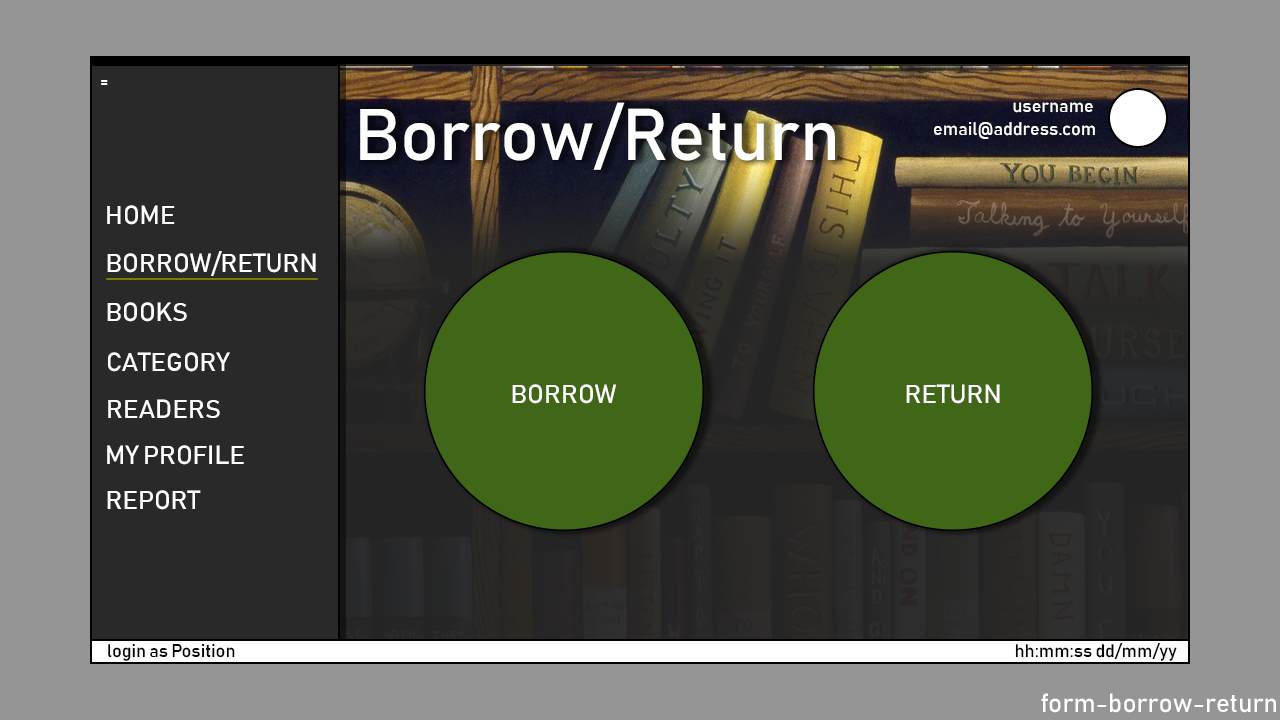
<style>
.page{position:relative;width:1280px;height:720px;background:#959595}
.page>*{position:absolute;margin:0}
.t1{font:18px "Bahnschrift";color:#ffffff}
.t2{font:72px "Bahnschrift";color:#ffffff}
.t3{font:26px "Bahnschrift";color:#ffffff}
.t4{font:26px "Bahnschrift";color:#fefefe}
.t5{font:18px "Bahnschrift";color:#000000}
</style>
<div class="page">
<p class="t1" style="left:101px;top:80px;width:7px;height:5px">=</p>
<p class="t2" style="left:360px;top:102px;width:475px;height:68px">Borrow/Return</p>
<p class="t1" style="left:1013px;top:102px;width:80px;height:11px">username</p>
<p class="t1" style="left:934px;top:122px;width:161px;height:17px">email@address.com</p>
<p class="t3" style="left:107px;top:205px;width:68px;height:20px">HOME</p>
<p class="t3" style="left:107px;top:251px;width:209px;height:25px">BORROW/RETURN</p>
<p class="t3" style="left:107px;top:302px;width:80px;height:20px">BOOKS</p>
<p class="t3" style="left:108px;top:352px;width:122px;height:20px">CATEGORY</p>
<p class="t4" style="left:512px;top:384px;width:104px;height:20px">BORROW</p>
<p class="t4" style="left:906px;top:384px;width:94px;height:20px">RETURN</p>
<p class="t3" style="left:108px;top:399px;width:112px;height:19px">READERS</p>
<p class="t3" style="left:107px;top:445px;width:137px;height:20px">MY PROFILE</p>
<p class="t3" style="left:107px;top:490px;width:94px;height:20px">REPORT</p>
<p class="t5" style="left:108px;top:644px;width:127px;height:17px">login as Position</p>
<p class="t5" style="left:1015px;top:643px;width:162px;height:18px">hh:mm:ss dd/mm/yy</p>
<p class="t4" style="left:1041px;top:693px;width:235px;height:20px">form-borrow-return</p>
</div>
